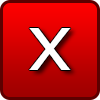
<style>
.page{position:relative;width:100px;height:100px}
.page>*{position:absolute;margin:0}
.t1{font:77px "MSReferenceSansSerif";color:#ffffff}
</style>
<div class="page">
<p class="t1" style="left:29px;top:28px;width:42px;height:42px">x</p>
</div>
